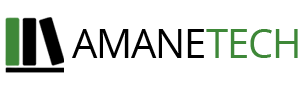
<style>
.page{position:relative;width:302px;height:89px;background:#ffffff}
.page>*{position:absolute;margin:0}
.t1{font:40px "OpenSans-Regular";letter-spacing:-0.028em;color:#000000;text-transform:uppercase}
.t2{font:40px "OpenSans-Regular";letter-spacing:-0.028em;color:#3e8838;text-transform:uppercase}
</style>
<div class="page">
<p class="t1" style="left:72px;top:29px;width:226px;height:29px">AMANE<span class="t2">TECH</span></p>
</div>
